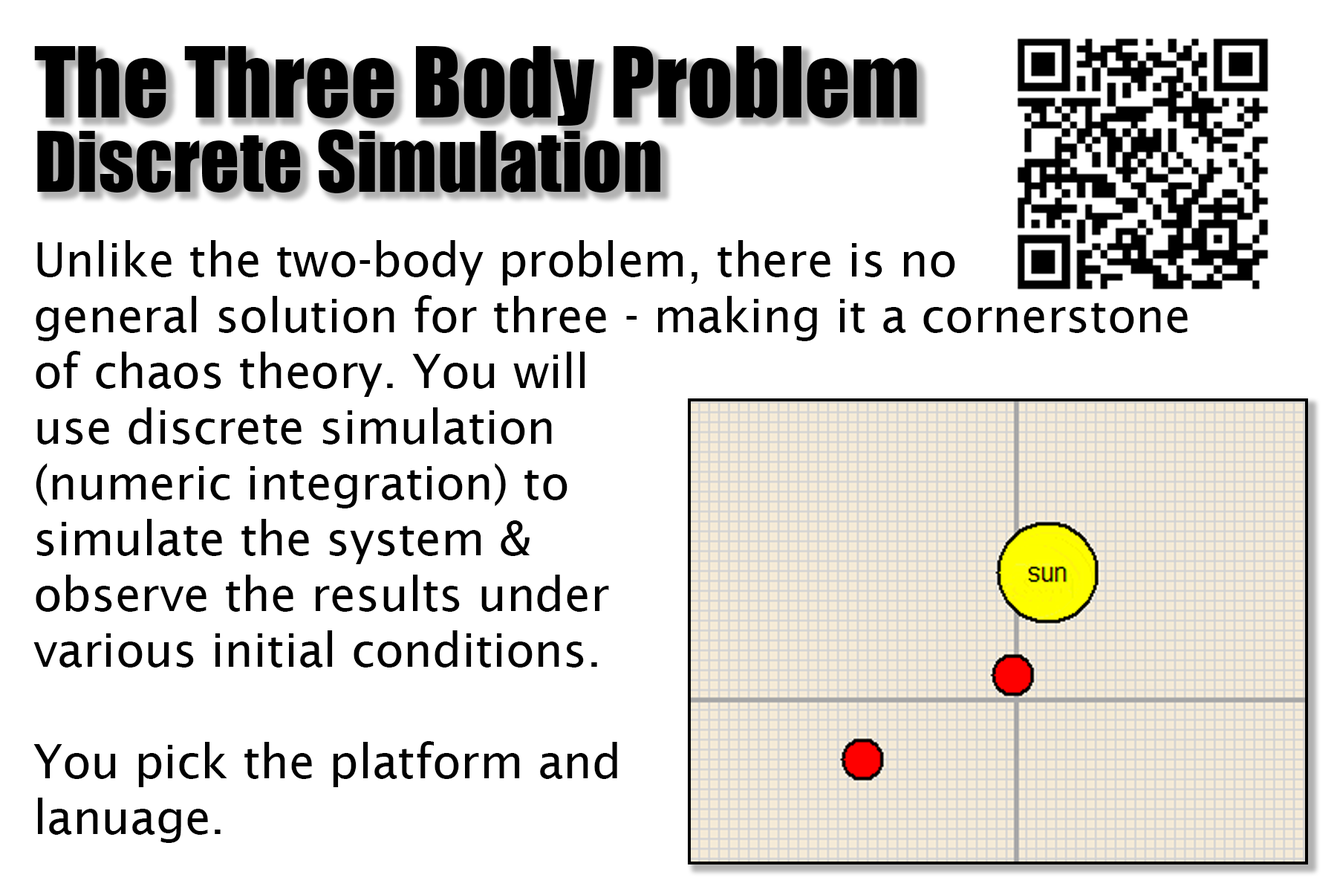
<style>
.page{position:relative;width:1337px;height:892px;background:#ffffff}
.page>*{position:absolute;margin:0}
.t1{font:89.8px "Impact";color:#000000}
.t2{font:77.4px/74.3px "Impact";color:#000000}
.t3{font:46.4px "LucidaSans";color:#000000}
</style>
<div class="page">
<p class="t1" style="left:34px;top:46px;width:884px;height:147px">The Three Body Problem<br><span class="t2">Discrete Simulation</span></p>
<p class="t3" style="left:33px;top:240px;width:1155px;height:603px">Unlike the two-body problem, there is no<br>general solution for three - making it a cornerstone <br>of chaos theory. You will <br>use discrete simulation<br>(numeric integration) to <br>simulate the system &amp; <br>observe the results under <br>various initial conditions.<br><br>You pick the platform and<br>lanuage.</p>
</div>
